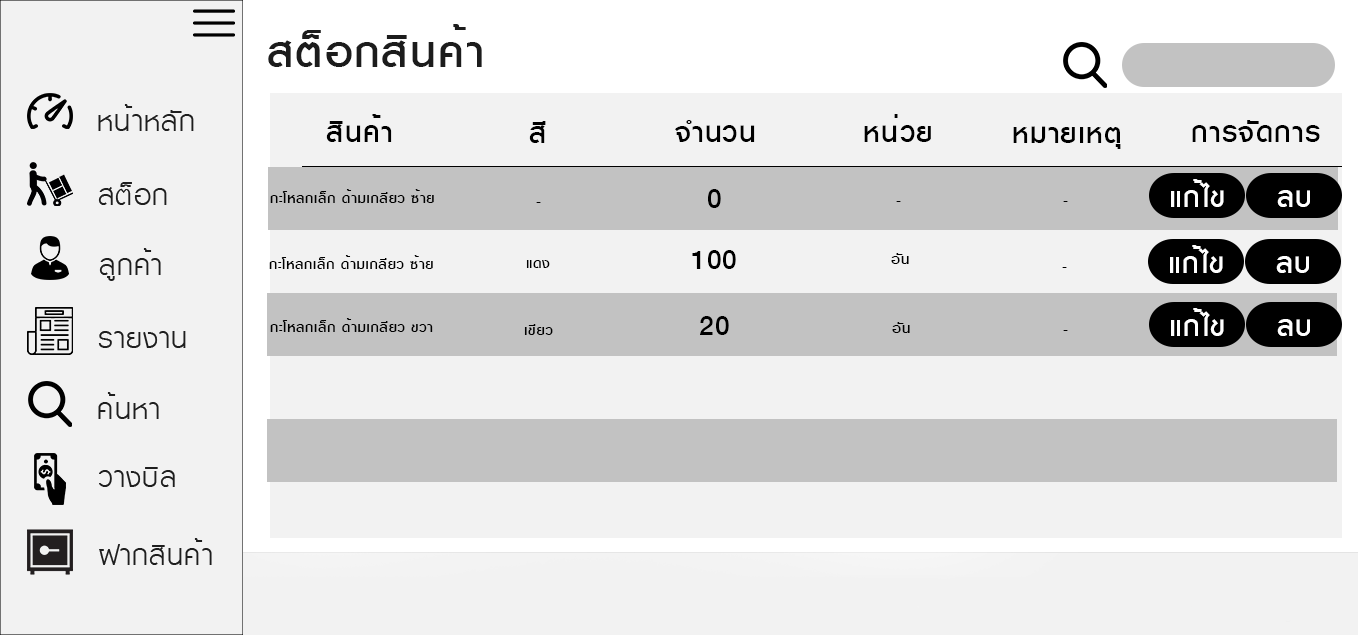
<style>
.page{position:relative;width:1358px;height:635px;background:#f2f2f2}
.page>*{position:absolute;margin:0}
.t1{font:61.6px "KittithadaMedium65P";letter-spacing:0.025em;color:#1c1c1c}
.t2{font:40px "KittithadaMedium65P";letter-spacing:0.025em;color:#000000}
.t3{font:40px "KittithadaMedium65P";letter-spacing:0.025em;color:#ffffff}
.t4{font:20.2px "KittithadaMedium65P";letter-spacing:0.025em;color:#000000}
</style>
<div class="page">
<p class="t1" style="left:268px;top:24px;width:214px;height:43px">สต็อกสินค้า</p>
<p class="t2" style="left:326px;top:114px;width:66px;height:28px">สินค้า</p>
<p class="t2" style="left:529px;top:121px;width:17px;height:22px">สี</p>
<p class="t2" style="left:675px;top:120px;width:80px;height:22px">จำนวน</p>
<p class="t2" style="left:864px;top:114px;width:67px;height:28px">หน่วย</p>
<p class="t2" style="left:1013px;top:126px;width:108px;height:23px">หมายเหตุ</p>
<p class="t2" style="left:1192px;top:120px;width:128px;height:22px">การจัดการ</p>
<p class="t3" style="left:1171px;top:179px;width:53px;height:28px">แก้ไข</p>
<p class="t4" style="left:270px;top:189px;width:164px;height:14px">กะโหลกเล็ก ด้ามเกลียว ซ้าย</p>
<p class="t2" style="left:708px;top:189px;width:13px;height:19px">0</p>
<p class="t3" style="left:1277px;top:190px;width:33px;height:17px">ลบ</p>
<p class="t4" style="left:536px;top:202px;width:5px;height:1px">-</p>
<p class="t4" style="left:896px;top:201px;width:5px;height:1px">-</p>
<p class="t4" style="left:1063px;top:201px;width:5px;height:1px">-</p>
<p class="t3" style="left:1170px;top:245px;width:53px;height:28px">แก้ไข</p>
<p class="t4" style="left:269px;top:255px;width:164px;height:14px">กะโหลกเล็ก ด้ามเกลียว ซ้าย</p>
<p class="t2" style="left:692px;top:250px;width:44px;height:19px">100</p>
<p class="t4" style="left:891px;top:253px;width:18px;height:11px">อัน</p>
<p class="t3" style="left:1276px;top:256px;width:33px;height:17px">ลบ</p>
<p class="t4" style="left:526px;top:260px;width:24px;height:8px">แดง</p>
<p class="t4" style="left:1062px;top:267px;width:5px;height:1px">-</p>
<p class="t4" style="left:270px;top:318px;width:163px;height:14px">กะโหลกเล็ก ด้ามเกลียว ขวา</p>
<p class="t2" style="left:700px;top:316px;width:29px;height:19px">20</p>
<p class="t3" style="left:1171px;top:308px;width:53px;height:28px">แก้ไข</p>
<p class="t4" style="left:524px;top:324px;width:29px;height:11px">เขียว</p>
<p class="t4" style="left:892px;top:322px;width:18px;height:11px">อัน</p>
<p class="t3" style="left:1277px;top:319px;width:33px;height:17px">ลบ</p>
<p class="t4" style="left:1063px;top:330px;width:5px;height:1px">-</p>
</div>
